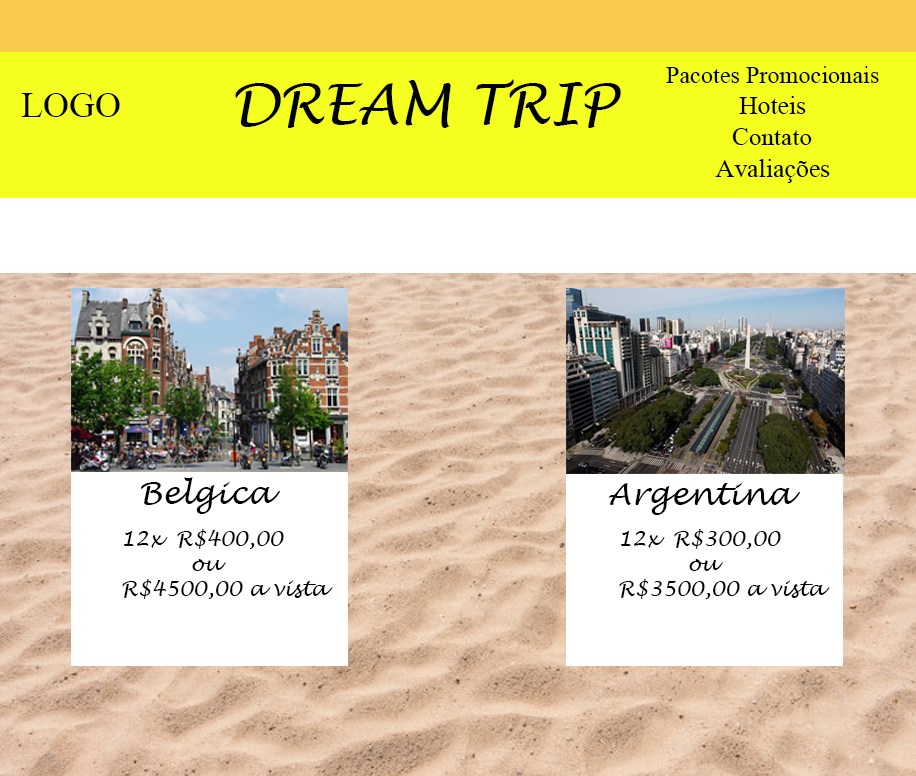
<style>
.page{position:relative;width:916px;height:776px;background:#ffffff}
.page>*{position:absolute;margin:0}
.t1{font:24.2px "MongolianBaiti";color:#010101}
.t2{font:55px "LucidaHandwriting-Italic";color:#010101}
.t3{font:36px "MongolianBaiti";color:#010101}
.t4{font:25.7px "MongolianBaiti";color:#000000}
.t5{font:25.3px "MongolianBaiti";color:#010101}
.t6{font:25.8px "MongolianBaiti";color:#010101}
.t7{font:31.4px "LucidaHandwriting-Italic";color:#010101}
.t8{font:20.6px "LucidaHandwriting-Italic";color:#000000}
</style>
<div class="page">
<p class="t1" style="left:666px;top:66px;width:213px;height:17px">Pacotes Promocionais</p>
<p class="t2" style="left:235px;top:79px;width:386px;height:49px">DREAM TRIP</p>
<p class="t3" style="left:21px;top:93px;width:99px;height:24px">LOGO</p>
<p class="t4" style="left:739px;top:96px;width:67px;height:18px">Hoteis</p>
<p class="t5" style="left:732px;top:128px;width:80px;height:17px">Contato</p>
<p class="t6" style="left:715px;top:159px;width:115px;height:24px">Avaliações</p>
<p class="t7" style="left:141px;top:477px;width:139px;height:37px">Belgica</p>
<p class="t7" style="left:608px;top:482px;width:192px;height:33px">Argentina</p>
<p class="t8" style="left:122px;top:529px;width:211px;height:70px">12x  R$400,00<br>          ou<br>R$4500,00 a vista</p>
<p class="t8" style="left:619px;top:529px;width:211px;height:70px">12x  R$300,00<br>          ou<br>R$3500,00 a vista</p>
</div>
